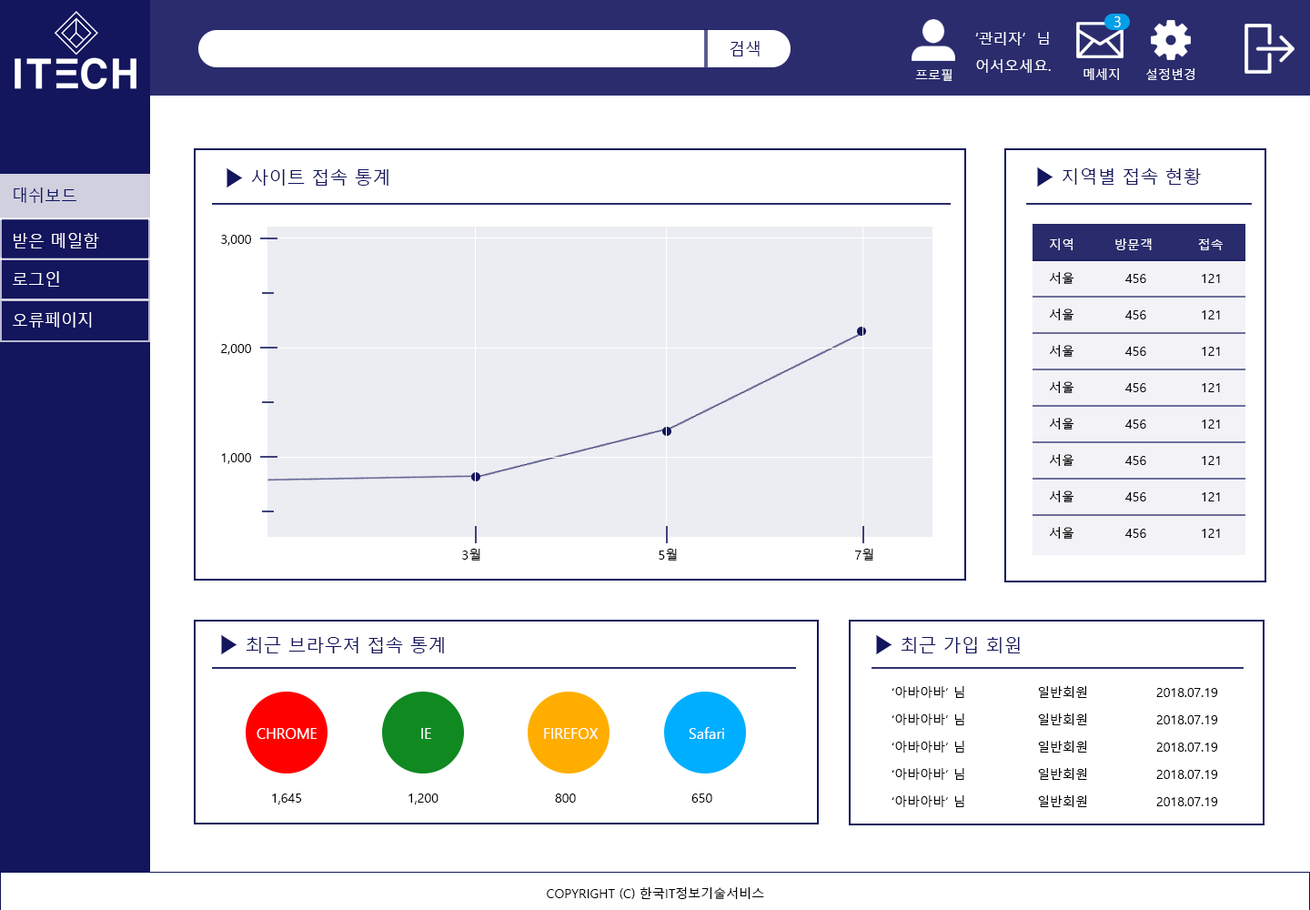
<style>
.page{position:relative;width:1310px;height:910px;background:#ffffff}
.page>*{position:absolute;margin:0}
.t1{font:14.6px "MalgunGothic";color:#ffffff}
.t2{font:16.4px "MalgunGothic";color:#13155d}
.t3{font:12.7px "MalgunGothic";color:#ffffff}
.t4{font:18.2px "MalgunGothic";color:#13155d}
.t5{font:16.4px "MalgunGothic";color:#ffffff}
.t6{font:12.7px/109.2px "MalgunGothic";color:#000000}
.t7{font:12.7px/36.4px "MalgunGothic";color:#010000}
.t8{font:12.7px "MalgunGothic";color:#000001}
.t9{font:12.7px/27.3px "MalgunGothic";color:#000000}
.t10{font:12.7px "MalgunGothic";color:#000000}
</style>
<div class="page">
<p class="t1" style="left:1114px;top:16px;width:7px;height:11px">3</p>
<p class="t2" style="left:730px;top:41px;width:30px;height:15px">검색</p>
<p class="t1" style="left:976px;top:32px;width:73px;height:13px">‘관리자’  님</p>
<p class="t1" style="left:976px;top:59px;width:75px;height:14px">어서오세요.</p>
<p class="t3" style="left:915px;top:68px;width:38px;height:13px">프로필</p>
<p class="t3" style="left:1084px;top:68px;width:35px;height:12px">메세지</p>
<p class="t3" style="left:1147px;top:68px;width:48px;height:12px">설정변경</p>
<p class="t4" style="left:251px;top:169px;width:138px;height:17px">사이트 접속 통계</p>
<p class="t4" style="left:1063px;top:168px;width:138px;height:17px">지역별 접속 현황</p>
<p class="t2" style="left:14px;top:187px;width:62px;height:16px">대쉬보드</p>
<p class="t5" style="left:14px;top:233px;width:85px;height:15px">받은 메일함</p>
<p class="t6" style="left:221px;top:235px;width:30px;height:229px">3,000<br>2,000<br>1,000</p>
<p class="t3" style="left:1050px;top:238px;width:173px;height:12px">지역  방문객     접속</p>
<p class="t5" style="left:13px;top:271px;width:46px;height:16px">로그인</p>
<p class="t7" style="left:1049px;top:272px;width:26px;height:267px">서울<br>서울<br>서울<br>서울<br>서울<br>서울<br>서울<br>서울</p>
<p class="t7" style="left:1126px;top:274px;width:21px;height:264px">456<br>456<br>456<br>456<br>456<br>456<br>456<br>456</p>
<p class="t7" style="left:1202px;top:274px;width:18px;height:264px">121<br>121<br>121<br>121<br>121<br>121<br>121<br>121</p>
<p class="t5" style="left:13px;top:312px;width:79px;height:16px">오류페이지</p>
<p class="t8" style="left:462px;top:548px;width:412px;height:13px">3월      5월      7월</p>
<p class="t4" style="left:246px;top:637px;width:198px;height:16px">최근 브라우져 접속 통계</p>
<p class="t4" style="left:901px;top:637px;width:120px;height:16px">최근 가입 회원</p>
<p class="t9" style="left:892px;top:686px;width:73px;height:121px">‘아바아바’ 님<br>‘아바아바’ 님<br>‘아바아바’ 님<br>‘아바아바’ 님<br>‘아바아바’ 님</p>
<p class="t9" style="left:1038px;top:686px;width:49px;height:121px">일반회원<br>일반회원<br>일반회원<br>일반회원<br>일반회원</p>
<p class="t9" style="left:1157px;top:688px;width:61px;height:118px">2018.07.19<br>2018.07.19<br>2018.07.19<br>2018.07.19<br>2018.07.19</p>
<p class="t1" style="left:257px;top:728px;width:61px;height:11px">CHROME</p>
<p class="t1" style="left:421px;top:728px;width:10px;height:11px">IE</p>
<p class="t1" style="left:544px;top:728px;width:55px;height:11px">FIREFOX</p>
<p class="t1" style="left:689px;top:727px;width:35px;height:12px">Safari</p>
<p class="t10" style="left:272px;top:794px;width:30px;height:10px">1,645</p>
<p class="t10" style="left:409px;top:794px;width:30px;height:10px">1,200</p>
<p class="t10" style="left:555px;top:794px;width:21px;height:9px">800</p>
<p class="t10" style="left:692px;top:794px;width:21px;height:9px">650</p>
<p class="t10" style="left:547px;top:887px;width:217px;height:12px">COPYRIGHT (C) 한국IT정보기술서비스</p>
</div>
